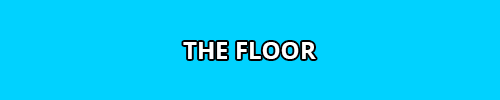
<style>
.page{position:relative;width:500px;height:100px;background:#00d2ff}
.page>*{position:absolute;margin:0}
.t1{font:24px "OpenSans-Bold";color:#ffffff}
</style>
<div class="page">
<p class="t1" style="left:183px;top:42px;width:133px;height:17px">THE FLOOR</p>
</div>
